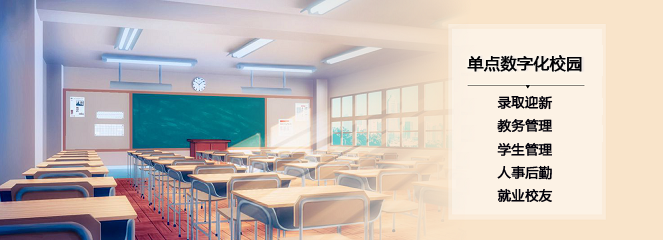
<style>
.page{position:relative;width:663px;height:240px}
.page>*{position:absolute;margin:0}
.t1{font:16px "MicrosoftYaHei";color:#020109;font-weight:bold}
.t2{font:13.3px "MicrosoftYaHei";color:#020109;font-weight:bold}
</style>
<div class="page">
<p class="t1" style="left:467px;top:55px;width:115px;height:17px">单点数字化校园</p>
<p class="t2" style="left:497px;top:96px;width:56px;height:106px">录取迎新<br>教务管理<br>学生管理<br>人事后勤<br>就业校友</p>
</div>
